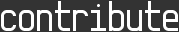
<style>
.page{position:relative;width:179px;height:32px;background:#333333}
.page>*{position:absolute;margin:0}
.t1{font:48px "Monkey";color:#ffffff}
</style>
<div class="page">
<p class="t1" style="left:1px;top:1px;width:177px;height:30px">contribute</p>
</div>
